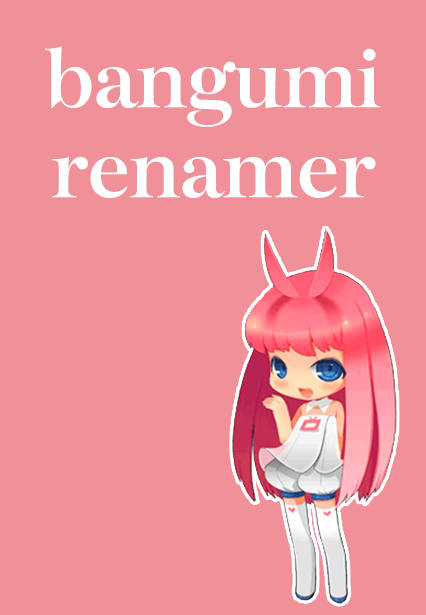
<style>
.page{position:relative;width:426px;height:615px;background:#f09199}
.page>*{position:absolute;margin:0}
.t1{font:78px/90px "Monday-Medium";color:#ffffff}
</style>
<div class="page">
<p class="t1" style="left:45px;top:46px;width:336px;height:152px;text-align:center">bangumi<br>renamer</p>
</div>
